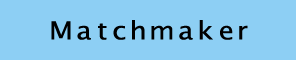
<style>
.page{position:relative;width:296px;height:60px;background:#8dcff4}
.page>*{position:absolute;margin:0}
.t1{font:25px "LucidaSansUnicode";letter-spacing:0.26em;color:#000000;scale:1.11 1}
</style>
<div class="page">
<p class="t1" style="left:51px;top:20px;width:197px;height:20px">Matchmaker</p>
</div>
